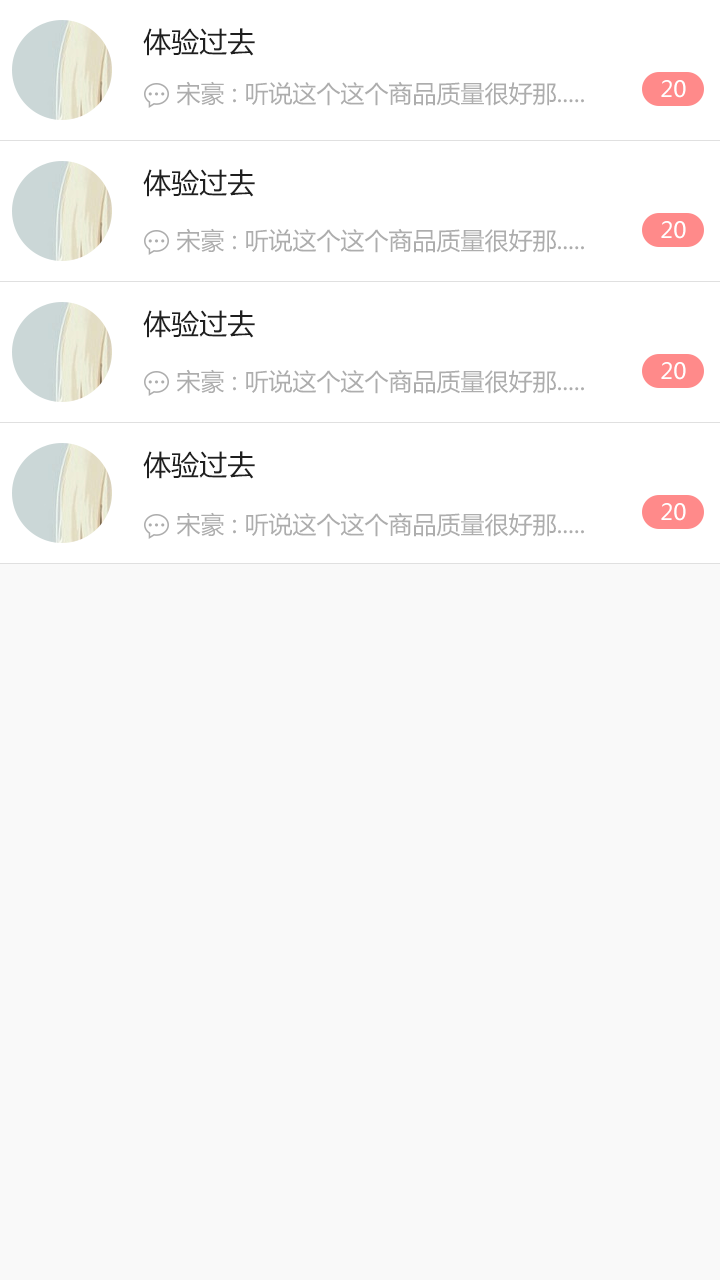
<style>
.page{position:relative;width:720px;height:1280px;background:#f9f9f9}
.page>*{position:absolute;margin:0}
.t1{font:28px "MicrosoftYaHei";color:#1f1f1f}
.t2{font:24px "MicrosoftYaHei";color:#adadad}
.t3{font:22px "MicrosoftYaHei";color:#ffffff}
</style>
<div class="page">
<p class="t1" style="left:143px;top:28px;width:112px;height:28px">体验过去</p>
<p class="t2" style="left:177px;top:81px;width:407px;height:25px">宋豪 : 听说这个这个商品质量很好那.....</p>
<p class="t3" style="left:661px;top:80px;width:25px;height:18px">20</p>
<p class="t1" style="left:143px;top:169px;width:112px;height:28px">体验过去</p>
<p class="t3" style="left:661px;top:221px;width:25px;height:18px">20</p>
<p class="t2" style="left:177px;top:228px;width:407px;height:25px">宋豪 : 听说这个这个商品质量很好那.....</p>
<p class="t1" style="left:143px;top:310px;width:112px;height:28px">体验过去</p>
<p class="t3" style="left:661px;top:362px;width:25px;height:18px">20</p>
<p class="t2" style="left:177px;top:369px;width:407px;height:25px">宋豪 : 听说这个这个商品质量很好那.....</p>
<p class="t1" style="left:143px;top:451px;width:112px;height:28px">体验过去</p>
<p class="t3" style="left:661px;top:503px;width:25px;height:18px">20</p>
<p class="t2" style="left:177px;top:512px;width:407px;height:25px">宋豪 : 听说这个这个商品质量很好那.....</p>
</div>
